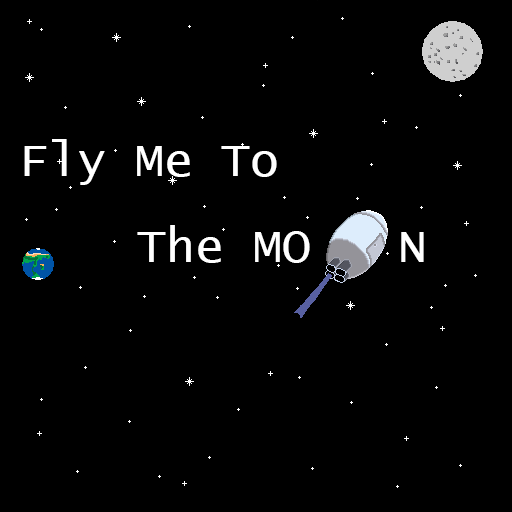
<style>
.page{position:relative;width:512px;height:512px;background:#000000}
.page>*{position:absolute;margin:0}
.t1{font:48px "LucidaConsole";color:#ffffff}
</style>
<div class="page">
<p class="t1" style="left:24px;top:139px;width:253px;height:46px">Fly Me To</p>
<p class="t1" style="left:137px;top:225px;width:287px;height:38px">The MO   N</p>
</div>
